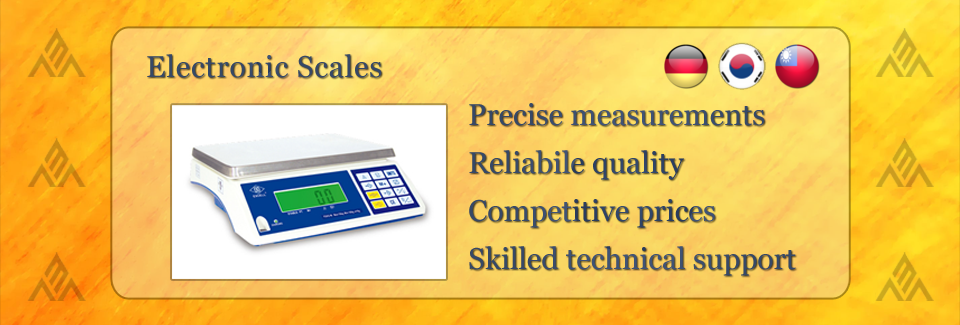
<style>
.page{position:relative;width:960px;height:325px}
.page>*{position:absolute;margin:0}
.t1{font:30px "Georgia";letter-spacing:0.025em;color:#364866}
.t2{font:30px/48px "Georgia";color:#364969}
</style>
<div class="page">
<p class="t1" style="left:147px;top:54px;width:235px;height:24px">Electronic Scales</p>
<p class="t2" style="left:469px;top:103px;width:327px;height:173px">Precise measurements<br>Reliabile quality<br>Competitive prices<br>Skilled technical support</p>
</div>
